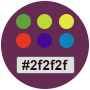
<style>
.page{position:relative;width:90px;height:90px;background:#662a53}
.page>*{position:absolute;margin:0}
.t1{font:14px "Arial-BoldMT";color:#240e1d}
</style>
<div class="page">
<p class="t1" style="left:22px;top:59px;width:46px;height:11px">#2f2f2f</p>
</div>
